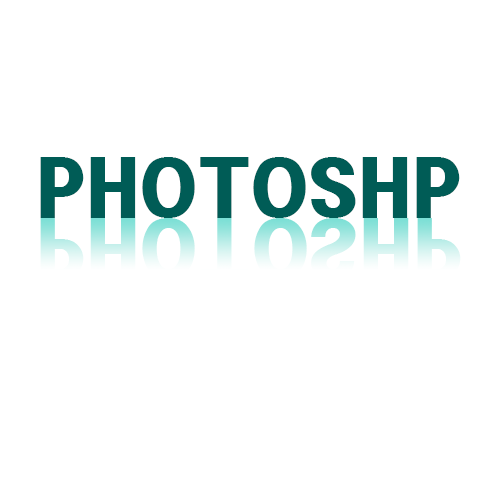
<style>
.page{position:relative;width:500px;height:500px;background:#ffffff}
.page>*{position:absolute;margin:0}
.t1{font:70px "HeadlineR-HM";letter-spacing:-0.02em;color:#005c56}
.t2{font:70px "HeadlineR-HM";letter-spacing:-0.02em}
</style>
<div class="page">
<p class="t1" style="left:40px;top:157px;width:420px;height:61px">PHOTOSHP</p>
<p class="t2" style="left:40px;top:218px;width:421px;height:61px">PHOTOSHP</p>
</div>
